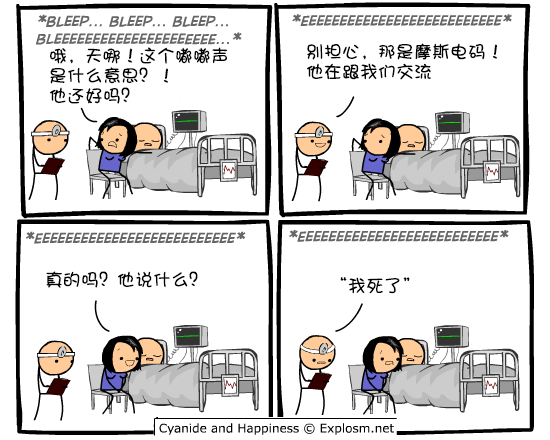
<style>
.page{position:relative;width:550px;height:440px;background:#ffffff}
.page>*{position:absolute;margin:0}
.t1{font:18px/20px "DFPShaoNvW5";color:#000000}
.t2{font:18px "DFPShaoNvW5";color:#000000}
</style>
<div class="page">
<p class="t1" style="left:50px;top:47px;width:178px;height:57px">哦，天哪！这个嘟嘟声<br>是什么意思？！<br>他还好吗？</p>
<p class="t1" style="left:307px;top:43px;width:191px;height:37px">别担心，那是摩斯电码！<br>他在跟我们交流</p>
<p class="t2" style="left:46px;top:271px;width:152px;height:17px">真的吗？他说什么？</p>
<p class="t2" style="left:340px;top:277px;width:70px;height:17px">“我死了”</p>
</div>
